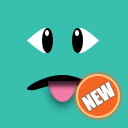
<style>
.page{position:relative;width:128px;height:128px;background:#38bfae}
.page>*{position:absolute;margin:0}
.t1{font:18.6px "Impact";color:#ffffff}
</style>
<div class="page">
<p class="t1" style="left:81px;top:81px;width:34px;height:30px;rotate:-32deg">NEW</p>
</div>
